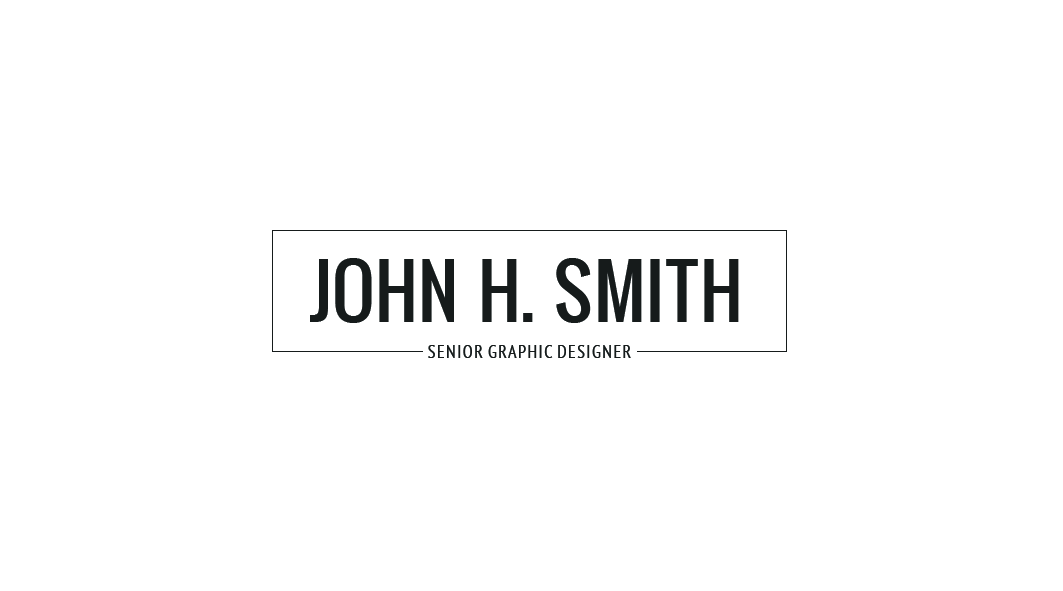
<style>
.page{position:relative;width:1063px;height:591px;background:#ffffff}
.page>*{position:absolute;margin:0}
.t1{font:72.3px "Oswald";color:#161b1b;text-transform:uppercase}
.t2{font:18.1px "PTSans-Narrow";color:#161b1b;text-transform:uppercase}
</style>
<div class="page">
<p class="t1" style="left:310px;top:258px;width:429px;height:65px">john H. smith</p>
<p class="t2" style="left:428px;top:345px;width:203px;height:13px">senior graphic designer</p>
</div>
